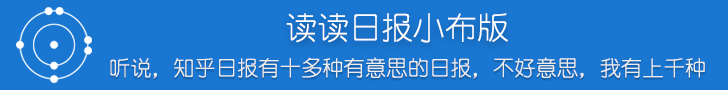
<style>
.page{position:relative;width:728px;height:90px;background:#1977d2}
.page>*{position:absolute;margin:0}
.t1{font:32px "YouYuan";color:#ffffff}
.t2{font:21.3px "YouYuan";color:#ededed}
</style>
<div class="page">
<p class="t1" style="left:286px;top:13px;width:222px;height:30px">读读日报小布版</p>
<p class="t2" style="left:110px;top:57px;width:595px;height:22px">听说，知乎日报有十多种有意思的日报，不好意思，我有上千种</p>
</div>
